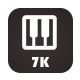
<style>
.page{position:relative;width:80px;height:80px;background:#ffffff}
.page>*{position:absolute;margin:0}
.t1{font:15px "Bauhaus93";color:#ffffff}
</style>
<div class="page">
<p class="t1" style="left:32px;top:57px;width:17px;height:10px">7K</p>
</div>
